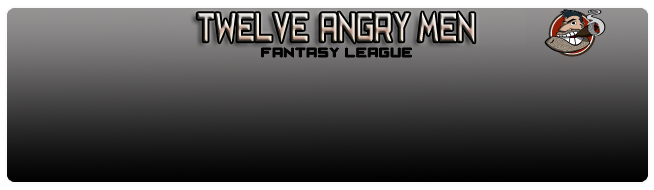
<style>
.page{position:relative;width:654px;height:190px}
.page>*{position:absolute;margin:0}
.t1{font:37.1px "CafeNeroM54";letter-spacing:0.025em;scale:0.56 1}
.t2{font:12px "CafeNeroM54";letter-spacing:0.1em;color:#000000}
</style>
<div class="page">
<p class="t1" style="left:197px;top:12px;width:278px;height:31px">TWELVE ANGRY MEN</p>
<p class="t2" style="left:261px;top:47px;width:151px;height:11px">FANTASY LEAGUE</p>
</div>
